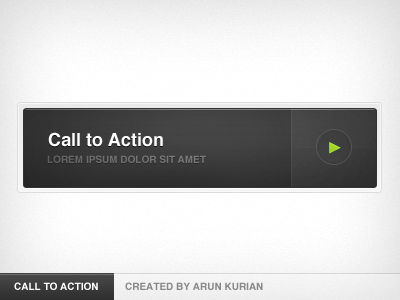
<style>
.page{position:relative;width:400px;height:300px}
.page>*{position:absolute;margin:0}
.t1{font:18px "Helvetica-Bold";color:#ffffff}
.t2{font:10px "Helvetica-Bold";color:#6e6e6e;text-transform:uppercase}
.t3{font:10px "Helvetica-Bold";color:#ffffff;text-transform:uppercase}
.t4{font:10px "Helvetica-Bold";color:#898989;text-transform:uppercase}
</style>
<div class="page">
<p class="t1" style="left:48px;top:132px;width:115px;height:15px">Call to Action</p>
<p class="t2" style="left:47px;top:155px;width:159px;height:8px">Lorem Ipsum Dolor Sit Amet</p>
<p class="t3" style="left:14px;top:282px;width:84px;height:8px">CALL TO ACTION</p>
<p class="t4" style="left:125px;top:282px;width:138px;height:8px">Created By Arun Kurian</p>
</div>
